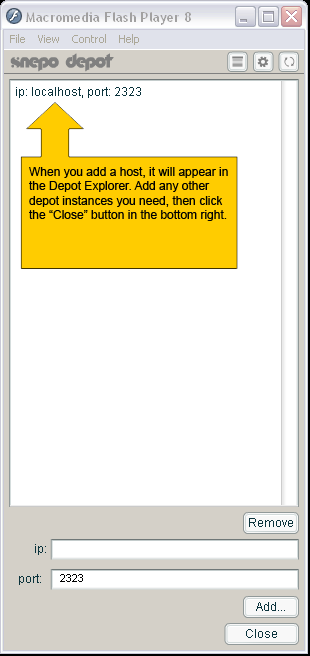
<style>
.page{position:relative;width:310px;height:656px;background:#ffffff}
.page>*{position:absolute;margin:0}
.t1{font:12px "ArialMT";color:#000000}
</style>
<div class="page">
<p class="t1" style="left:29px;top:167px;width:199px;height:54px">When you add a host, it will appear in<br>the Depot Explorer. Add any other<br>depot instances you need, then click<br>the “Close” button in the bottom right.</p>
</div>
